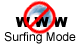
<style>
.page{position:relative;width:80px;height:45px;background:#ffffff}
.page>*{position:absolute;margin:0}
.t1{font:14px "Arial-Black";color:#000000}
.t2{font:12px "ArialMT";color:#000000}
</style>
<div class="page">
<p class="t1" style="left:15px;top:17px;width:53px;height:10px">W W W</p>
<p class="t2" style="left:4px;top:32px;width:72px;height:12px">Surfing Mode</p>
</div>
